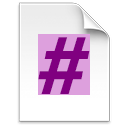
<style>
.page{position:relative;width:128px;height:128px;background:#ffffff}
.page>*{position:absolute;margin:0}
.t1{font:88.7px "Consolas-BoldItalic";color:#800080}
</style>
<div class="page">
<p class="t1" style="left:38px;top:37px;width:52px;height:57px">#</p>
</div>
